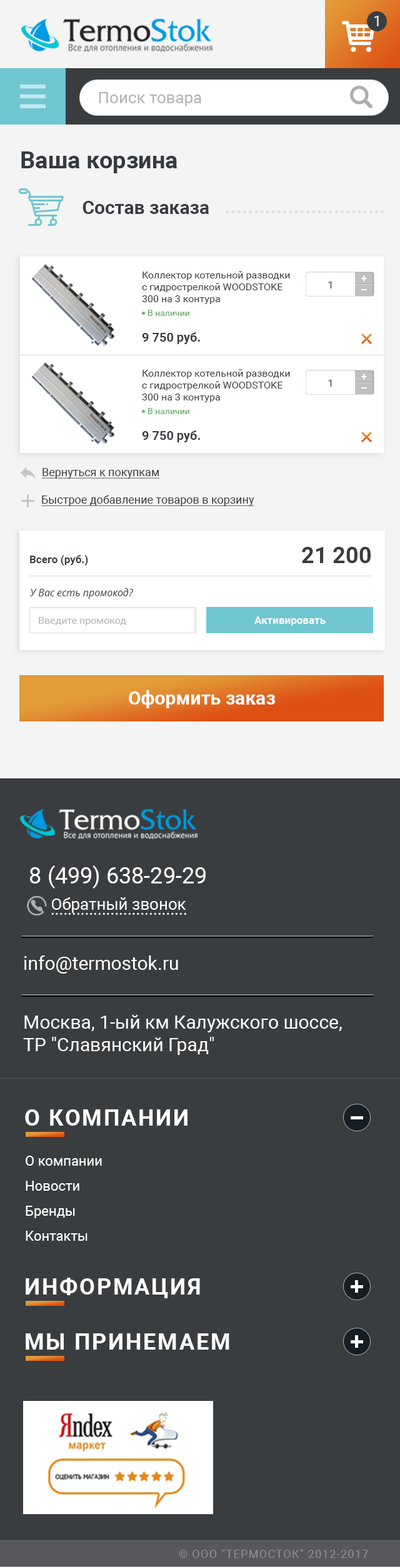
<style>
.page{position:relative;width:400px;height:1568px;background:#393d40}
.page>*{position:absolute;margin:0}
.t1{font:15px "Roboto-Regular";color:#ffffff}
.t2{font:16.3px "Roboto-Regular";color:#b2b2b2}
.t3{font:23.8px "Roboto-Bold";color:#353a3e}
.t4{font:18.8px "Roboto-Bold";color:#393d40}
.t5{font:19.8px "Roboto-Bold";color:#e0e0e0}
.t6{font:10px "Roboto-Regular";color:#393d40}
.t7{font:10.6px "Roboto-Bold";color:#7c7c7c}
.t8{font:10.6px "Roboto-Bold";color:#ffffff}
.t9{font:8.8px "Roboto-Regular";color:#67b068}
.t10{font:12.5px "Roboto-Bold";color:#393d40}
.t11{font:11.3px "Roboto-Regular";color:#393d40;text-decoration:underline}
.t12{font:10.6px "Roboto-Bold";color:#393d40}
.t13{font:22.5px "Roboto-Bold";color:#393d40}
.t14{font:10px "OpenSans-Italic";color:#393d40}
.t15{font:10px "Roboto-Regular";color:#b2b2b2}
.t16{font:18.8px "Roboto-Bold";color:#ffffff}
.t17{font:22.5px "Roboto-Regular";color:#ffffff}
.t18{font:16.3px "Roboto-Regular";color:#ffffff}
.t19{font:18.8px "Roboto-Regular";color:#ffffff}
.t20{font:22.5px "Roboto-Bold";letter-spacing:0.075em;color:#ffffff;text-transform:uppercase}
.t21{font:13.8px/25px "Roboto-Regular";color:#ffffff}
.t22{font:11.3px "Roboto-Regular";letter-spacing:0.075em;color:#8e9092;text-transform:uppercase}
</style>
<div class="page">
<p class="t1" style="left:375px;top:16px;width:4px;height:10px">1</p>
<p class="t2" style="left:99px;top:92px;width:102px;height:14px">Поиск товара</p>
<p class="t3" style="left:21px;top:151px;width:157px;height:22px">Ваша корзина</p>
<p class="t4" style="left:83px;top:201px;width:127px;height:13px">Состав заказа</p>
<p class="t5" style="left:226px;top:210px;width:159px;height:3px">............................</p>
<p class="t6" style="left:142px;top:271px;width:148px;height:33px">Коллектор котельной разводки <br>с гидрострелкой WOODSTOKE <br>300 на 3 контура</p>
<p class="t7" style="left:328px;top:281px;width:4px;height:7px">1</p>
<p class="t8" style="left:362px;top:275px;width:5px;height:7px">+</p>
<p class="t8" style="left:362px;top:289px;width:5px;height:1px">–</p>
<p class="t9" style="left:148px;top:310px;width:42px;height:6px">В наличии</p>
<p class="t10" style="left:142px;top:332px;width:58px;height:12px">9 750 руб.</p>
<p class="t6" style="left:142px;top:369px;width:148px;height:33px">Коллектор котельной разводки <br>с гидрострелкой WOODSTOKE <br>300 на 3 контура</p>
<p class="t8" style="left:362px;top:374px;width:5px;height:6px">+</p>
<p class="t7" style="left:328px;top:379px;width:4px;height:8px">1</p>
<p class="t8" style="left:362px;top:387px;width:5px;height:2px">–</p>
<p class="t9" style="left:148px;top:408px;width:42px;height:6px">В наличии</p>
<p class="t10" style="left:142px;top:430px;width:58px;height:12px">9 750 руб.</p>
<p class="t11" style="left:42px;top:468px;width:118px;height:11px">Вернуться к покупкам</p>
<p class="t11" style="left:41px;top:495px;width:214px;height:11px">Быстрое добавление товаров в корзину</p>
<p class="t12" style="left:30px;top:555px;width:58px;height:11px">Всего (руб.)</p>
<p class="t13" style="left:302px;top:547px;width:69px;height:16px">21 200</p>
<p class="t14" style="left:29px;top:588px;width:104px;height:11px">У Вас есть промокод?</p>
<p class="t15" style="left:39px;top:617px;width:87px;height:9px">Введите промокод</p>
<p class="t8" style="left:255px;top:616px;width:71px;height:10px">Активировать</p>
<p class="t16" style="left:129px;top:690px;width:146px;height:18px">Оформить заказ</p>
<p class="t17" style="left:30px;top:865px;width:176px;height:23px">8 (499) 638-29-29</p>
<p class="t18" style="left:52px;top:897px;width:134px;height:16px">Обратный звонок</p>
<p class="t18" style="left:51px;top:913px;width:135px;height:2px">................................</p>
<p class="t19" style="left:24px;top:955px;width:154px;height:19px">info@termostok.ru</p>
<p class="t19" style="left:23px;top:1015px;width:319px;height:40px">Москва, 1-ый км Калужского шоссе, <br>ТР "Славянский Град"</p>
<p class="t20" style="left:25px;top:1109px;width:163px;height:17px">О КОМПАНИИ</p>
<p class="t21" style="left:26px;top:1156px;width:76px;height:85px">О компании<br>Новости<br>Бренды<br>Контакты</p>
<p class="t20" style="left:26px;top:1278px;width:174px;height:20px">Информация</p>
<p class="t20" style="left:26px;top:1333px;width:204px;height:17px">Мы принемаем</p>
<p class="t22" style="left:179px;top:1549px;width:190px;height:9px">© ООО "Термосток" 2012-2017</p>
</div>
